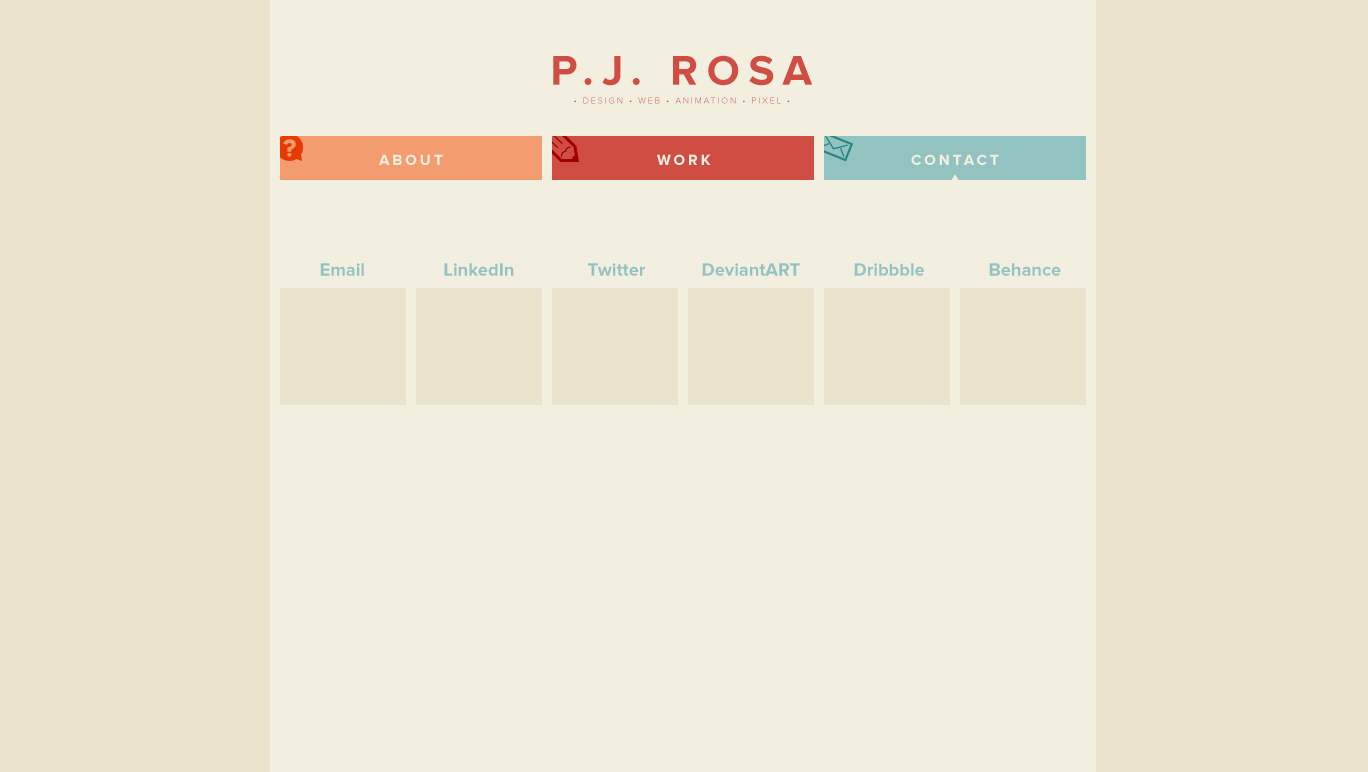
<style>
.page{position:relative;width:1368px;height:772px;background:#e9e4cb}
.page>*{position:absolute;margin:0}
.t1{font:43.3px "ProximaNova-Bold";letter-spacing:0.2em;color:#d04d43}
.t2{font:9px "ProximaNova-Light";letter-spacing:0.2em;color:#d04d43}
.t3{font:15.1px "ProximaNova-Bold";letter-spacing:0.2em;color:#f2efe1}
.t4{font:18.3px "ProximaNova-Bold";color:#92c3c1}
</style>
<div class="page">
<p class="t1" style="left:553px;top:55px;width:260px;height:31px">P.J. ROSA</p>
<p class="t2" style="left:574px;top:97px;width:216px;height:7px">• DESIGN • WEB • ANIMATION • PIXEL •</p>
<p class="t3" style="left:379px;top:154px;width:64px;height:11px">ABOUT</p>
<p class="t3" style="left:657px;top:154px;width:54px;height:11px">WORK</p>
<p class="t3" style="left:911px;top:154px;width:88px;height:11px">CONTACT</p>
<p class="t4" style="left:320px;top:263px;width:44px;height:13px">Email</p>
<p class="t4" style="left:444px;top:263px;width:70px;height:13px">LinkedIn</p>
<p class="t4" style="left:588px;top:263px;width:57px;height:13px">Twitter</p>
<p class="t4" style="left:702px;top:263px;width:98px;height:13px">DeviantART</p>
<p class="t4" style="left:854px;top:263px;width:70px;height:13px">Dribbble</p>
<p class="t4" style="left:989px;top:263px;width:72px;height:13px">Behance</p>
</div>
